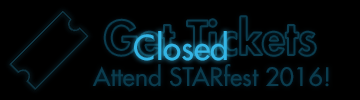
<style>
.page{position:relative;width:360px;height:100px;background:#000000}
.page>*{position:absolute;margin:0}
.t1{font:33.3px "FuturaStd-Medium";color:#33b5e5}
.t2{font:25px "FuturaStd-Medium";color:#0b3c4e}
</style>
<div class="page">
<p class="t1" style="left:134px;top:31px;width:93px;height:30px">Closed</p>
<p class="t2" style="left:92px;top:64px;width:237px;height:23px">Attend STARfest 2016!</p>
</div>
